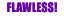
<style>
.page{position:relative;width:64px;height:16px;background:#ffffff}
.page>*{position:absolute;margin:0}
.t1{font:12px "Impact";color:#6700a8}
</style>
<div class="page">
<p class="t1" style="left:7px;top:2px;width:50px;height:11px">FLAWLESS!</p>
</div>
